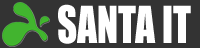
<style>
.page{position:relative;width:200px;height:48px;background:#333333}
.page>*{position:absolute;margin:0}
.t1{font:47.4px "Impact";color:#ffffff;font-variant:small-caps;scale:0.83 1}
</style>
<div class="page">
<p class="t1" style="left:58px;top:4px;width:133px;height:40px">SANTA IT</p>
</div>
